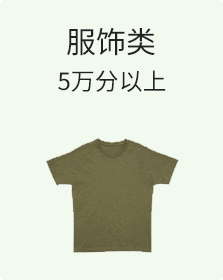
<style>
.page{position:relative;width:223px;height:280px;background:#f2f9ef}
.page>*{position:absolute;margin:0}
.t1{font:30px "SourceHanSansCN-Regular"}
.t2{font:30px "SourceHanSansCN-Regular";color:#222222}
.t3{font:24px "SourceHanSansCN-Regular";color:#222222}
</style>
<div class="page">
<p class="t1" style="left:67px;top:27px;width:88px;height:29px">纺织类</p>
<p class="t1" style="left:67px;top:27px;width:88px;height:29px">家电类</p>
<p class="t1" style="left:67px;top:28px;width:88px;height:28px">生活类</p>
<p class="t1" style="left:67px;top:28px;width:88px;height:28px">厨卫类</p>
<p class="t2" style="left:67px;top:27px;width:88px;height:29px">服饰类</p>
<p class="t3" style="left:58px;top:70px;width:108px;height:22px">5万分以上</p>
</div>
